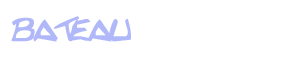
<style>
.page{position:relative;width:300px;height:60px;background:#ffffff}
.page>*{position:absolute;margin:0}
.t1{font:60px "Texted'critureLanfeust";color:#b0b8f9}
</style>
<div class="page">
<p class="t1" style="left:11px;top:16px;width:120px;height:26px">bateau</p>
</div>
